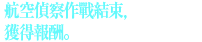
<style>
.page{position:relative;width:202px;height:42px;background:#ffffff}
.page>*{position:absolute;margin:0}
.t1{font:18px "RyuminPro-Bold";letter-spacing:-0.08em;color:#64f9fc;scale:0.9 1}
</style>
<div class="page">
<p class="t1" style="left:4px;top:1px;width:123px;height:40px">航空偵察作戰結束，<br>獲得報酬。</p>
</div>
